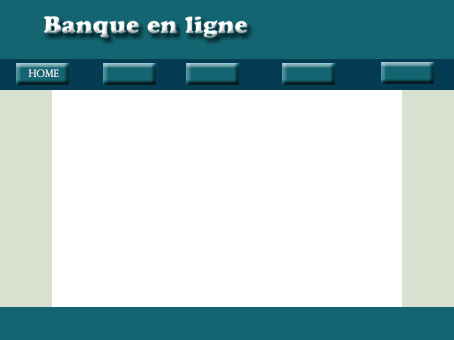
<style>
.page{position:relative;width:454px;height:340px;background:#ffffff}
.page>*{position:absolute;margin:0}
.t1{font:24px "CooperBlackStd"}
.t2{font:10px "PerpetuaTitlingMT-Light";color:#ffffff}
</style>
<div class="page">
<p class="t1" style="left:43px;top:16px;width:205px;height:23px">Banque en ligne</p>
<p class="t2" style="left:28px;top:69px;width:31px;height:9px">Home</p>
</div>
